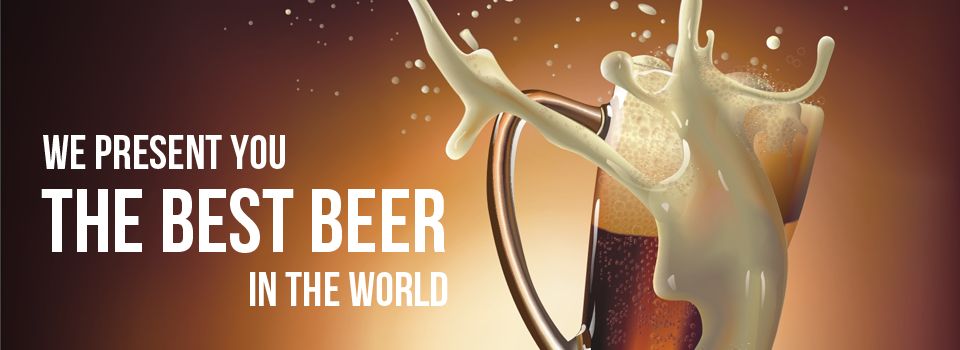
<style>
.page{position:relative;width:960px;height:350px}
.page>*{position:absolute;margin:0}
.t1{font:48px "BebasNeue";color:#ffffff;text-transform:uppercase}
.t2{font:90px "BebasNeue";color:#ffffff;text-transform:uppercase}
</style>
<div class="page">
<p class="t1" style="left:43px;top:135px;width:242px;height:34px">we present you</p>
<p class="t2" style="left:41px;top:188px;width:404px;height:65px">the best beer</p>
<p class="t1" style="left:250px;top:272px;width:198px;height:34px">in the world</p>
</div>
